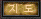
<style>
.page{position:relative;width:41px;height:19px}
.page>*{position:absolute;margin:0}
.t1{font:10px "NanumBarunGothic";letter-spacing:0.2em;color:#f6d2a4}
</style>
<div class="page">
<p class="t1" style="left:9px;top:4px;width:24px;height:9px">지 도</p>
</div>
